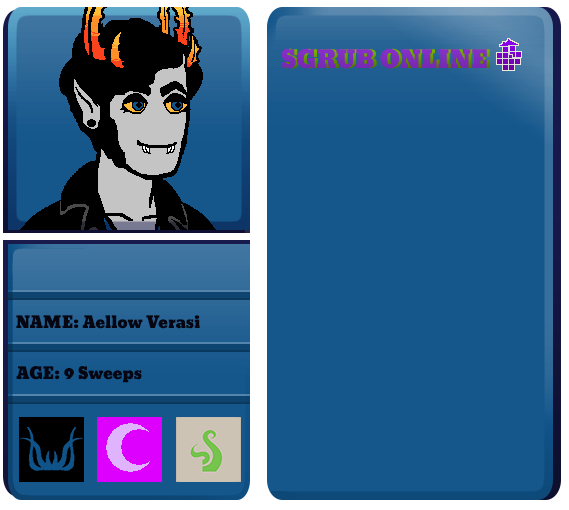
<style>
.page{position:relative;width:569px;height:510px;background:#15568b}
.page>*{position:absolute;margin:0}
.t1{font:16px "Bevan";color:#060512}
</style>
<div class="page">
<p class="t1" style="left:16px;top:315px;width:184px;height:14px">NAME: Aellow Verasi</p>
<p class="t1" style="left:16px;top:366px;width:126px;height:17px">AGE: 9 Sweeps</p>
</div>
